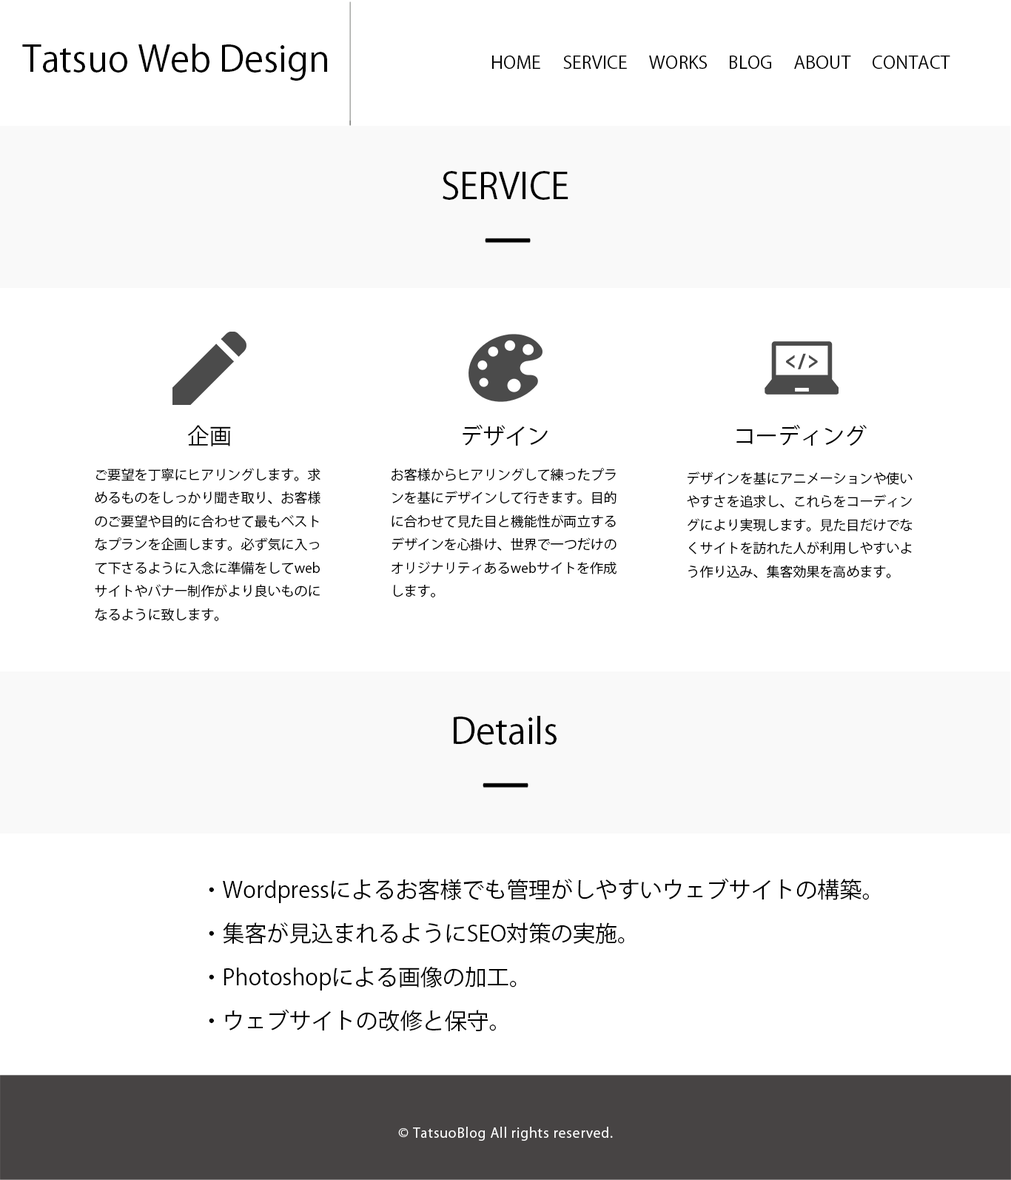
<style>
.page{position:relative;width:1011px;height:1180px;background:#ffffff}
.page>*{position:absolute;margin:0}
.t1{font:35.5px "KozGoPr6N-Regular";color:#000000}
.t2{font:17.5px "KozGoPr6N-Regular";color:#000000}
.t3{font:22.2px "KozGoPr6N-Regular";color:#000000}
.t4{font:13.3px "KozGoPr6N-Regular";color:#000000}
.t5{font:22.2px/43.7px "KozGoPr6N-Regular";color:#000000}
.t6{font:13.3px "KozGoPr6N-Regular";letter-spacing:0.05em;color:#ffffff}
</style>
<div class="page">
<p class="t1" style="left:22px;top:44px;width:305px;height:37px">Tatsuo Web Design</p>
<p class="t2" style="left:492px;top:56px;width:48px;height:13px">HOME</p>
<p class="t2" style="left:563px;top:56px;width:64px;height:13px">SERVICE</p>
<p class="t2" style="left:649px;top:56px;width:58px;height:13px">WORKS</p>
<p class="t2" style="left:730px;top:56px;width:41px;height:13px">BLOG</p>
<p class="t2" style="left:794px;top:56px;width:57px;height:13px">ABOUT</p>
<p class="t2" style="left:872px;top:56px;width:78px;height:13px">CONTACT</p>
<p class="t1" style="left:443px;top:171px;width:125px;height:29px">SERVICE</p>
<p class="t3" style="left:187px;top:425px;width:44px;height:21px">企画</p>
<p class="t3" style="left:463px;top:424px;width:85px;height:22px">デザイン</p>
<p class="t3" style="left:736px;top:424px;width:131px;height:22px">コーディング</p>
<p class="t4" style="left:95px;top:468px;width:225px;height:153px">ご要望を丁寧にヒアリングします。求めるものをしっかり聞き取り、お客様のご要望や目的に合わせて最もベストなプランを企画します。必ず気に入って下さるように入念に準備をしてwebサイトやバナー制作がより良いものになるように致します。</p>
<p class="t4" style="left:391px;top:468px;width:225px;height:129px">お客様からヒアリングして練ったプランを基にデザインして行きます。目的に合わせて見た目と機能性が両立するデザインを心掛け、世界で一つだけのオリジナリティあるwebサイトを作成します。</p>
<p class="t4" style="left:687px;top:471px;width:225px;height:107px">デザインを基にアニメーションや使いやすさを追求し、これらをコーディングにより実現します。見た目だけでなくサイトを訪れた人が利用しやすいよう作り込み、集客効果を高めます。</p>
<p class="t1" style="left:454px;top:716px;width:103px;height:28px">Details</p>
<p class="t5" style="left:209px;top:878px;width:660px;height:153px">・Wordpressによるお客様でも管理がしやすいウェブサイトの構築。<br>・集客が見込まれるようにSEO対策の実施。<br>・Photoshopによる画像の加工。<br>・ウェブサイトの改修と保守。</p>
<p class="t6" style="left:398px;top:1126px;width:215px;height:14px">© TatsuoBlog All rights reserved.</p>
</div>
